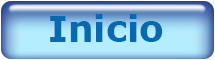
<style>
.page{position:relative;width:215px;height:60px}
.page>*{position:absolute;margin:0}
.t1{font:36px "Verdana-Bold";color:#0669b2}
</style>
<div class="page">
<p class="t1" style="left:50px;top:14px;width:113px;height:28px">Inicio</p>
</div>
